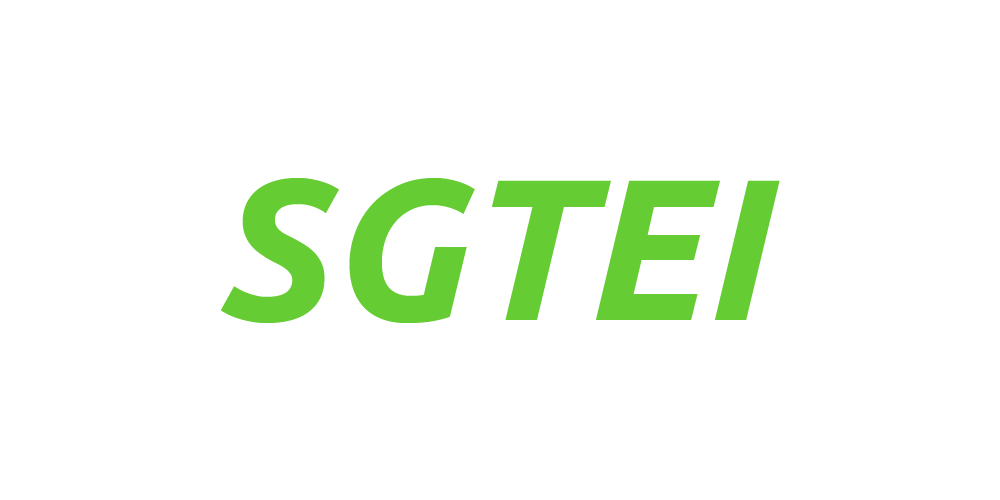
<style>
.page{position:relative;width:1000px;height:500px;background:#ffffff}
.page>*{position:absolute;margin:0}
.t1{font:200px "Ubuntu-BoldItalic";color:#66cc33}
</style>
<div class="page">
<p class="t1" style="left:220px;top:177px;width:560px;height:146px">SGTEI</p>
</div>
